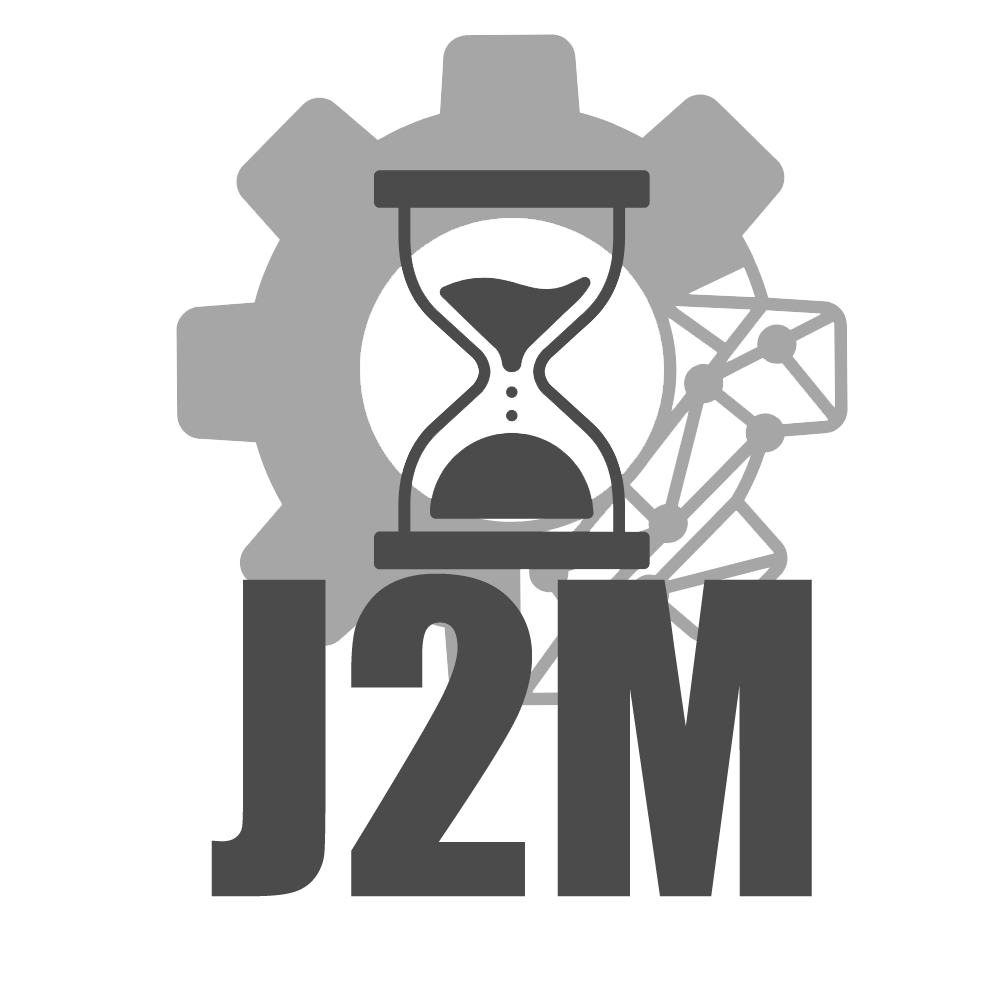
<style>
.page{position:relative;width:1000px;height:1000px;background:#ffffff}
.page>*{position:absolute;margin:0}
.t1{font:400px "Impact";color:#4b4b4b}
</style>
<div class="page">
<p class="t1" style="left:211px;top:573px;width:601px;height:324px">J2M</p>
</div>
